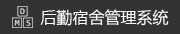
<style>
.page{position:relative;width:180px;height:34px;background:#333333}
.page>*{position:absolute;margin:0}
.t1{font:16px "MicrosoftYaHei";color:#ffffff}
</style>
<div class="page">
<p class="t1" style="left:40px;top:9px;width:129px;height:17px">后勤宿舍管理系统</p>
</div>
